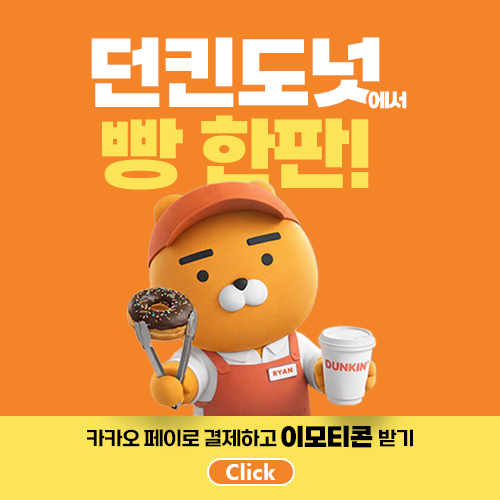
<style>
.page{position:relative;width:500px;height:500px;background:#f38428}
.page>*{position:absolute;margin:0}
.t1{font:80px "SBAggroB";letter-spacing:-0.04em;color:#ffffff}
.t2{font:20px "SBAggroB";letter-spacing:-0.04em;color:#ffffff}
.t3{font:80px "SBAggroB";letter-spacing:-0.04em;color:#fbe458}
.t4{font:20px "SBAggroM";letter-spacing:-0.04em;color:#000000}
.t5{font:25px "SBAggroB";letter-spacing:-0.04em;color:#000000}
.t6{font:22.3px "SegoeUI-Bold";color:#ffffff}
</style>
<div class="page">
<p class="t1" style="left:91px;top:37px;width:294px;height:71px">던킨도넛</p>
<p class="t2" style="left:368px;top:91px;width:39px;height:18px">에서</p>
<p class="t3" style="left:102px;top:115px;width:267px;height:75px">빵 한판!</p>
<p class="t4" style="left:87px;top:425px;width:326px;height:23px">카카오 페이로 결제하고 <span class="t5">이모티콘 </span>받기</p>
<p class="t6" style="left:226px;top:463px;width:50px;height:17px">Click</p>
</div>
